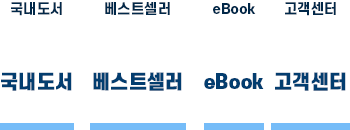
<style>
.page{position:relative;width:350px;height:130px;background:#ffffff}
.page>*{position:absolute;margin:0}
.t1{font:14px "S-CoreDream-7ExtraBold";color:#012849}
.t2{font:19px "S-CoreDream-9Black";color:#033d6f}
</style>
<div class="page">
<p class="t1" style="left:11px;top:2px;width:51px;height:14px">국내도서</p>
<p class="t1" style="left:105px;top:2px;width:65px;height:13px">베스트셀러</p>
<p class="t1" style="left:213px;top:3px;width:43px;height:11px">eBook</p>
<p class="t1" style="left:285px;top:2px;width:51px;height:14px">고객센터</p>
<p class="t2" style="left:1px;top:72px;width:71px;height:19px">국내도서</p>
<p class="t2" style="left:93px;top:72px;width:89px;height:19px">베스트셀러</p>
<p class="t2" style="left:204px;top:73px;width:60px;height:16px">eBook</p>
<p class="t2" style="left:275px;top:72px;width:71px;height:19px">고객센터</p>
</div>
